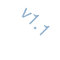
<style>
.page{position:relative;width:60px;height:60px;background:#ffffff}
.page>*{position:absolute;margin:0}
.t1{font:18px "HelveticaNeue";letter-spacing:-0.005em;color:#8badcb}
</style>
<div class="page">
<p class="t1" style="left:21px;top:7px;width:29px;height:29px;rotate:45deg">v1.1</p>
</div>
